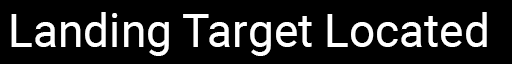
<style>
.page{position:relative;width:512px;height:64px;background:#000000}
.page>*{position:absolute;margin:0}
.t1{font:46px "Roboto-Regular";color:#ffffff}
</style>
<div class="page">
<p class="t1" style="left:11px;top:12px;width:476px;height:44px">Landing Target Located</p>
</div>
